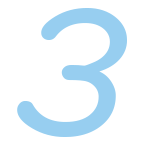
<style>
.page{position:relative;width:150px;height:150px;background:#ffffff}
.page>*{position:absolute;margin:0}
.t1{font:179.1px "MVBoli";color:#97cef0}
</style>
<div class="page">
<p class="t1" style="left:17px;top:8px;width:110px;height:129px">3</p>
</div>
